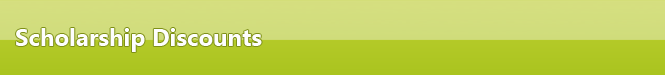
<style>
.page{position:relative;width:665px;height:75px}
.page>*{position:absolute;margin:0}
.t1{font:24px "SegoeUI-Bold";color:#fefefe}
</style>
<div class="page">
<p class="t1" style="left:16px;top:28px;width:246px;height:24px">Scholarship Discounts</p>
</div>
